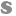
<style>
.page{position:relative;width:16px;height:16px;background:#ffffff}
.page>*{position:absolute;margin:0}
.t1{font:18px "CooperBlackStd";color:#898989}
</style>
<div class="page">
<p class="t1" style="left:0px;top:1px;width:12px;height:13px">S</p>
</div>
